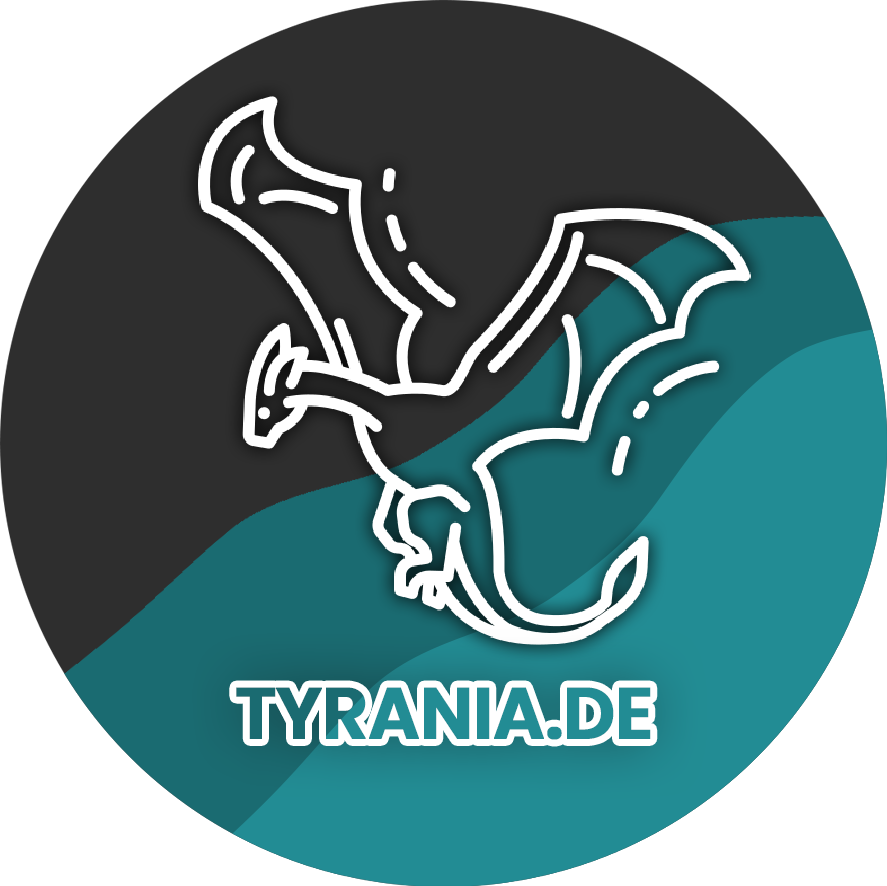
<style>
.page{position:relative;width:887px;height:886px;background:#ffffff}
.page>*{position:absolute;margin:0}
.t1{font:72.4px "Poppins-SemiBold";letter-spacing:-0.03em;color:#228c94;font-weight:bold}
</style>
<div class="page">
<p class="t1" style="left:236px;top:687px;width:415px;height:53px">TYRANIA.DE</p>
</div>
